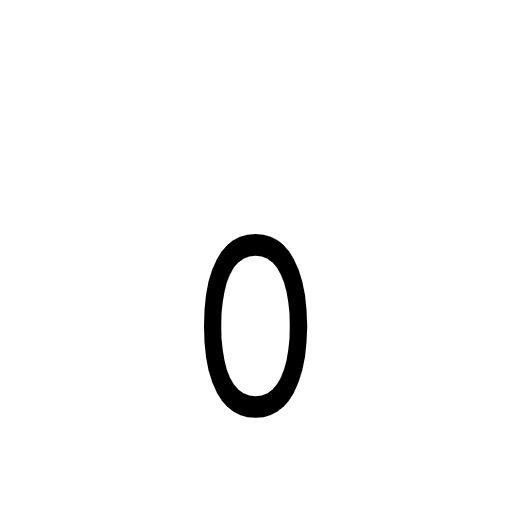
<style>
.page{position:relative;width:512px;height:512px;background:#ffffff}
.page>*{position:absolute;margin:0}
.t1{font:256px "VarelaRound-Regular";color:#000000;scale:0.74 1}
</style>
<div class="page">
<p class="t1" style="left:203px;top:234px;width:105px;height:184px">0</p>
</div>
